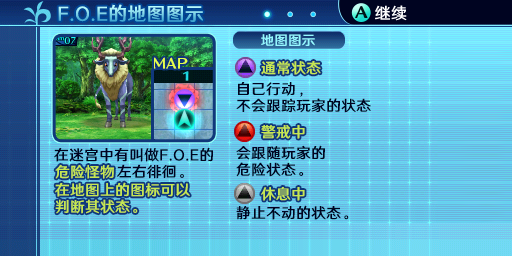
<style>
.page{position:relative;width:512px;height:256px}
.page>*{position:absolute;margin:0}
.t1{font:18.7px "HYWenHei-FEW";letter-spacing:0.025em}
.t2{font:16px "HYWenHei-FEW";letter-spacing:0.025em}
.t3{font:13.3px "HYWenHei-FEW";letter-spacing:0.025em;color:#94f7ff}
.t4{font:14.7px "HYWenHei-FEW";letter-spacing:0.025em;color:#c6e752}
.t5{font:14.7px/16.7px "HYWenHei-FEW";letter-spacing:0.025em;color:#000421}
.t6{font:14.7px/16.7px "HYWenHei-FEW";letter-spacing:0.025em;color:#c6e752}
.t7{font:14.7px "HYWenHei-FEW";letter-spacing:0.025em;color:#000421}
</style>
<div class="page">
<p class="t1" style="left:58px;top:4px;width:145px;height:18px">F.O.E的地图图示</p>
<p class="t2" style="left:376px;top:5px;width:32px;height:16px">继续</p>
<p class="t3" style="left:261px;top:34px;width:54px;height:12px">地图图示</p>
<p class="t4" style="left:261px;top:61px;width:60px;height:14px">通常状态</p>
<p class="t5" style="left:236px;top:82px;width:135px;height:31px">自己行动，<br>不会跟踪玩家的状态</p>
<p class="t4" style="left:261px;top:125px;width:44px;height:14px">警戒中</p>
<p class="t5" style="left:54px;top:147px;width:159px;height:32px">在迷宫中有叫做F.O.E的<br>            左右徘徊。</p>
<p class="t5" style="left:236px;top:145px;width:89px;height:32px">会跟随玩家的<br>危险状态。</p>
<p class="t4" style="left:55px;top:164px;width:59px;height:15px">危险怪物</p>
<p class="t6" style="left:55px;top:182px;width:135px;height:32px">在地图上的图标可以<br>判断其状态。</p>
<p class="t4" style="left:261px;top:187px;width:44px;height:14px">休息中</p>
<p class="t7" style="left:236px;top:205px;width:113px;height:15px">静止不动的状态。</p>
</div>
